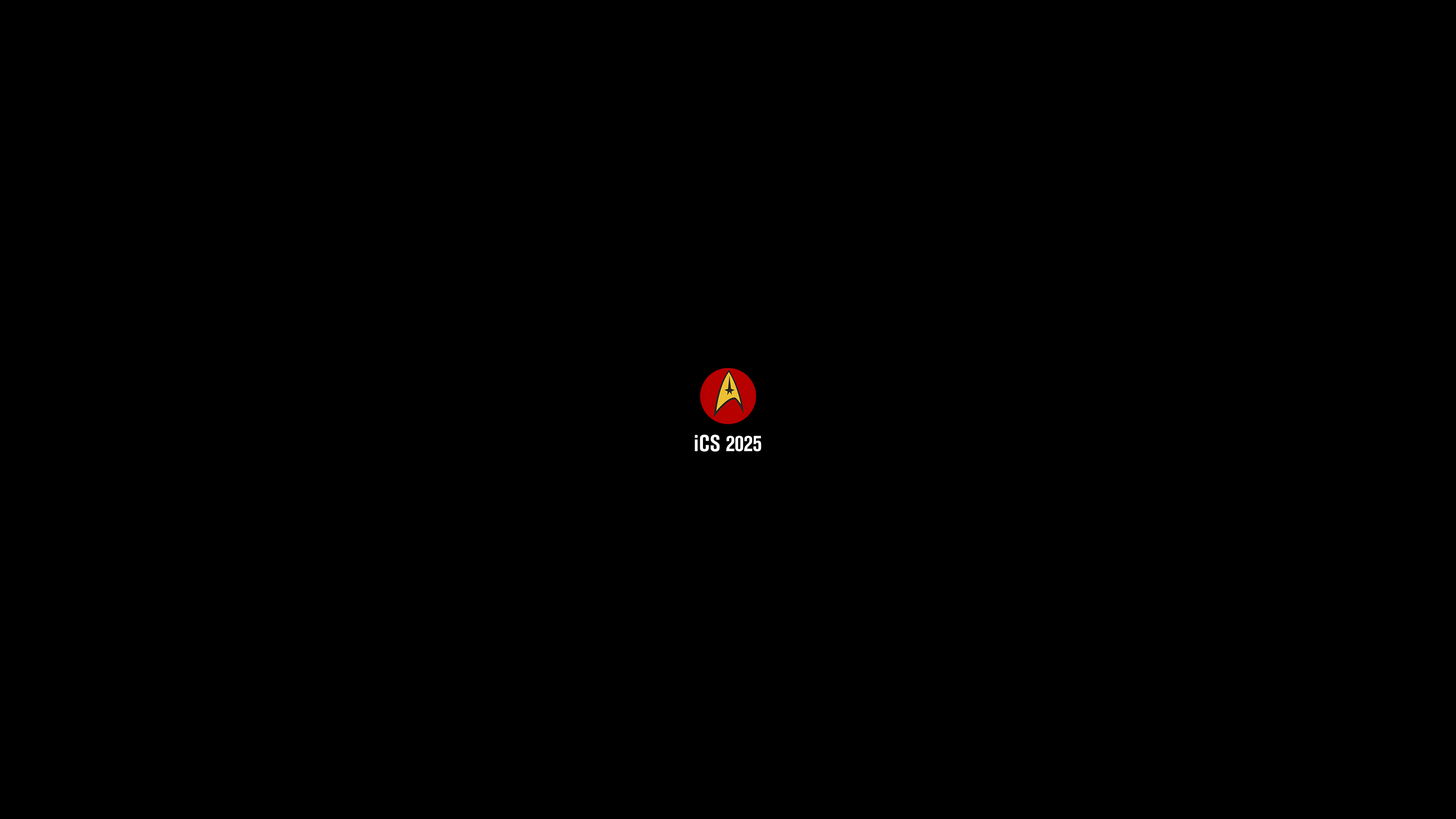
<style>
.page{position:relative;width:1456px;height:819px;background:#000000}
.page>*{position:absolute;margin:0}
.t1{font:22.7px "AkzidenzGroteskCn_PFL-Bold";color:#ffffff}
</style>
<div class="page">
<p class="t1" style="left:695px;top:435px;width:66px;height:17px">iCS 2025</p>
</div>
